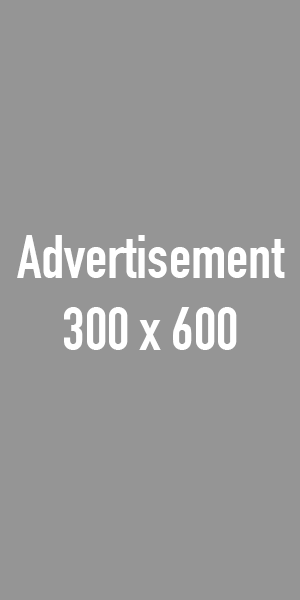
<style>
.page{position:relative;width:300px;height:600px;background:#959595}
.page>*{position:absolute;margin:0}
.t1{font:60px "DINCondensed-Bold";color:#ffffff}
</style>
<div class="page">
<p class="t1" style="left:17px;top:235px;width:268px;height:115px;text-align:center">Advertisement<br>300 x 600</p>
</div>
